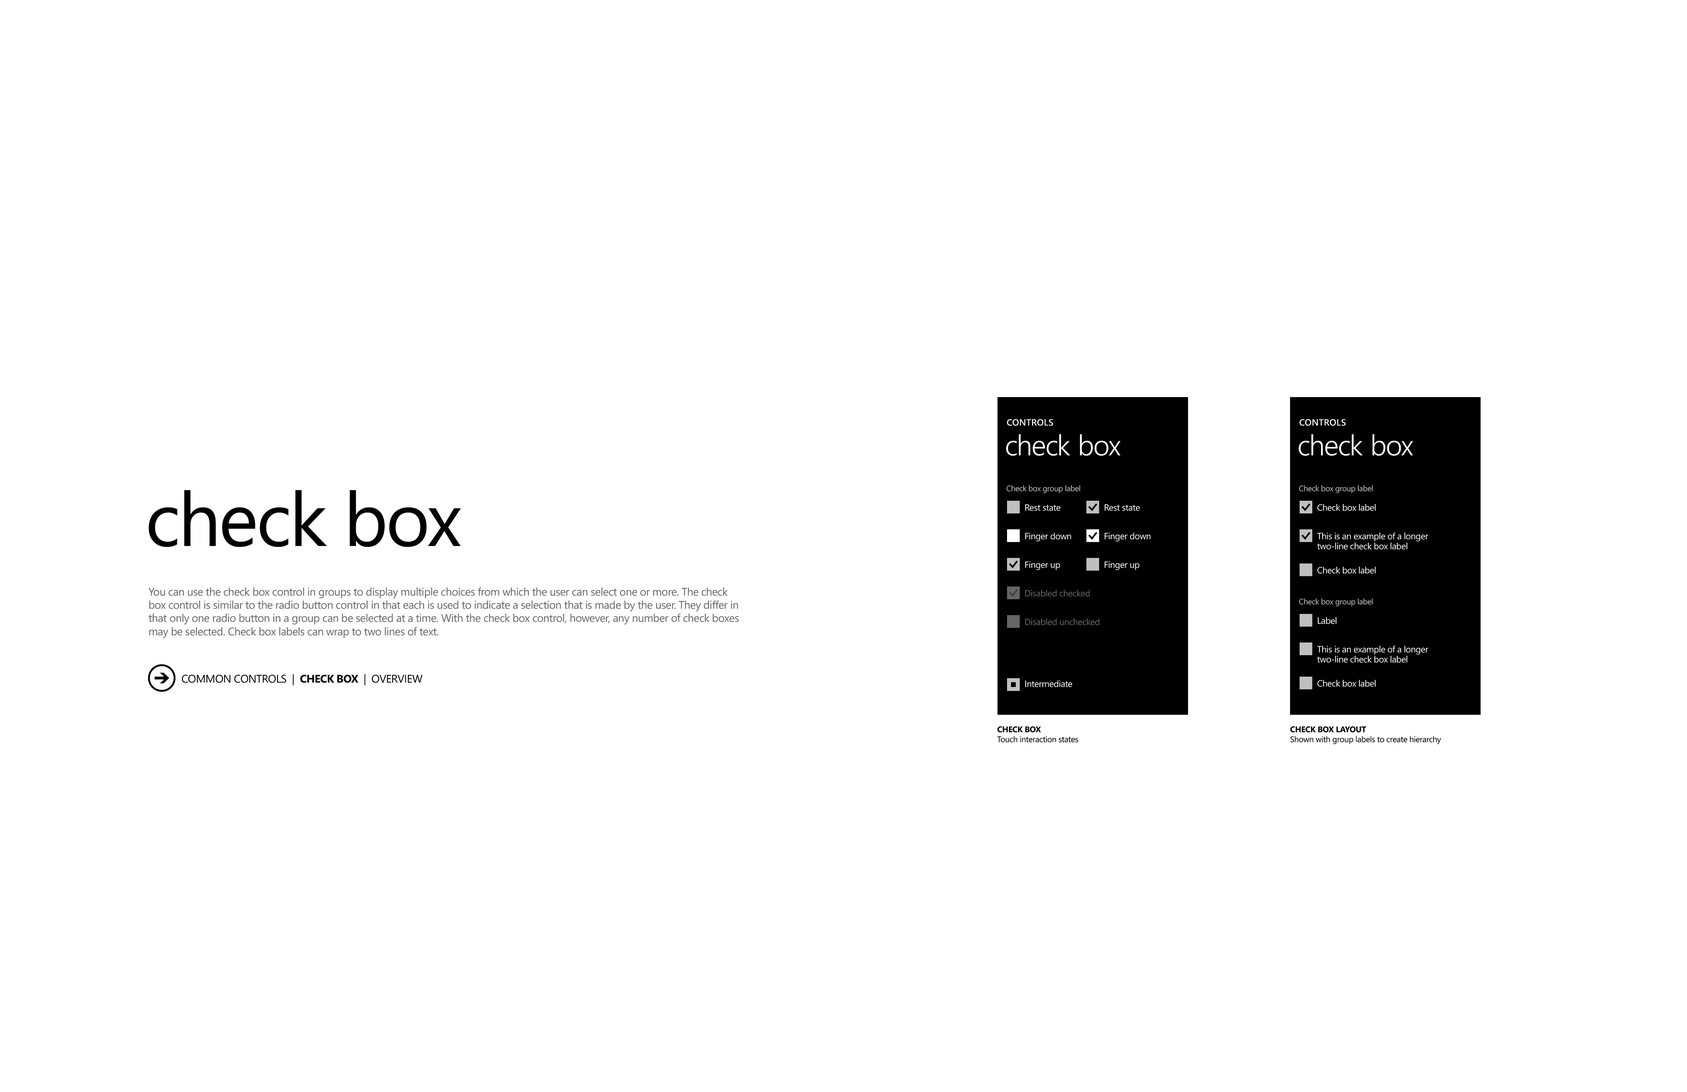
<style>
.page{position:relative;width:1687px;height:1092px;background:#ffffff}
.page>*{position:absolute;margin:0}
.t1{font:9px "SegoeWP-Semibold";letter-spacing:0.025em;color:#ffffff;text-transform:uppercase}
.t2{font:28.6px "SegoeWP-SemiLight";letter-spacing:-0.01em;color:#ffffff}
.t3{font:7.9px "SegoeWP";letter-spacing:-0.025em;color:#bfbfbf}
.t4{font:75.3px "SegoeWP";letter-spacing:-0.025em;color:#000000}
.t5{font:9px "SegoeWP";letter-spacing:-0.025em;color:#ffffff}
.t6{font:9px/10.1px "SegoeWP";letter-spacing:-0.025em;color:#ffffff}
.t7{font:11px "SegoeWP";letter-spacing:-0.025em;color:#666666}
.t8{font:9px "SegoeWP";letter-spacing:-0.025em;color:#666666}
.t9{font:11px "SegoeWP";letter-spacing:-0.025em;color:#000000}
.t10{font:11px "SegoeWP-Bold";letter-spacing:-0.025em;color:#000000}
.t11{font:8.3px "SegoeWP";letter-spacing:-0.025em;color:#000000}
.t12{font:8.3px "SegoeWP-Bold";letter-spacing:-0.025em;color:#000000;text-transform:uppercase}
</style>
<div class="page">
<p class="t1" style="left:1007px;top:419px;width:46px;height:7px">controls</p>
<p class="t1" style="left:1300px;top:419px;width:46px;height:7px">controls</p>
<p class="t2" style="left:1006px;top:434px;width:115px;height:22px">check box</p>
<p class="t2" style="left:1299px;top:434px;width:115px;height:22px">check box</p>
<p class="t3" style="left:1007px;top:485px;width:74px;height:8px">Check box group label</p>
<p class="t3" style="left:1299px;top:485px;width:74px;height:8px">Check box group label</p>
<p class="t4" style="left:148px;top:490px;width:313px;height:57px">check box</p>
<p class="t5" style="left:1026px;top:504px;width:35px;height:7px">Rest state</p>
<p class="t5" style="left:1105px;top:504px;width:35px;height:7px">Rest state</p>
<p class="t5" style="left:1318px;top:504px;width:58px;height:7px">Check box label</p>
<p class="t5" style="left:1026px;top:532px;width:46px;height:10px">Finger down</p>
<p class="t5" style="left:1105px;top:532px;width:46px;height:10px">Finger down</p>
<p class="t6" style="left:1317px;top:532px;width:112px;height:18px">This is an example of a longer<br>two-line check box label</p>
<p class="t5" style="left:1026px;top:561px;width:35px;height:9px">Finger up</p>
<p class="t5" style="left:1105px;top:561px;width:35px;height:9px">Finger up</p>
<p class="t5" style="left:1318px;top:567px;width:58px;height:7px">Check box label</p>
<p class="t7" style="left:148px;top:587px;width:591px;height:51px">You can use the check box control in groups to display multiple choices from which the user can select one or more. The check box control is similar to the radio button control in that each is used to indicate a selection that is made by the user. They differ in that only one radio button in a group can be selected at a time. With the check box control, however, any number of check boxes may be selected. Check box labels can wrap to two lines of text.</p>
<p class="t8" style="left:1026px;top:590px;width:64px;height:7px">Disabled checked</p>
<p class="t3" style="left:1299px;top:598px;width:74px;height:8px">Check box group label</p>
<p class="t5" style="left:1318px;top:617px;width:19px;height:7px">Label</p>
<p class="t8" style="left:1026px;top:618px;width:74px;height:7px">Disabled unchecked</p>
<p class="t6" style="left:1317px;top:646px;width:112px;height:17px">This is an example of a longer<br>two-line check box label</p>
<p class="t9" style="left:182px;top:674px;width:240px;height:11px">COMMON CONTROLS  |  <span class="t10">CHECK BOX</span>  |  OVERVIEW</p>
<p class="t5" style="left:1026px;top:680px;width:46px;height:7px">Intermediate</p>
<p class="t5" style="left:1318px;top:680px;width:58px;height:7px">Check box label</p>
<p class="t11" style="left:997px;top:726px;width:81px;height:16px"><span class="t12">check box<br></span>Touch interaction states</p>
<p class="t11" style="left:1290px;top:726px;width:152px;height:18px"><span class="t12">check box layout<br></span>Shown with group labels to create hierarchy</p>
</div>
